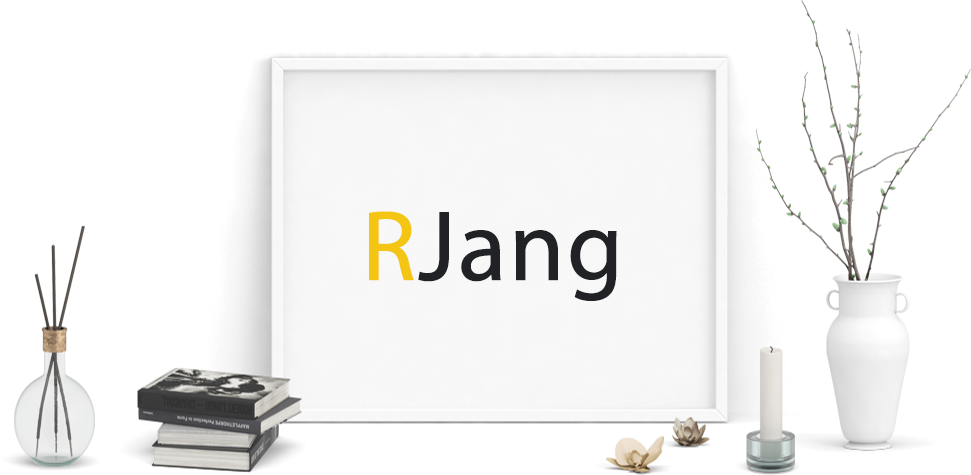
<style>
.page{position:relative;width:971px;height:475px;background:#ffffff}
.page>*{position:absolute;margin:0}
.t1{font:100px "MyriadPro-Regular";color:#212226;font-weight:bold}
.t2{font:100px "MyriadPro-Regular";color:#f4c613;font-weight:bold}
</style>
<div class="page">
<p class="t1" style="left:369px;top:211px;width:248px;height:90px"><span class="t2">R</span>Jang</p>
</div>
